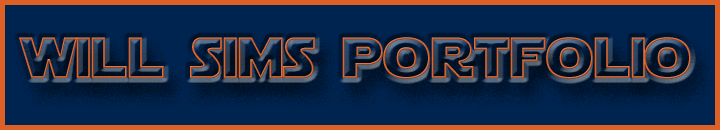
<style>
.page{position:relative;width:720px;height:130px;background:#002450}
.page>*{position:absolute;margin:0}
.t1{font:57.4px "StarJediHollow";color:#dd6026}
</style>
<div class="page">
<p class="t1" style="left:19px;top:37px;width:672px;height:42px">will sims portfolio</p>
</div>
